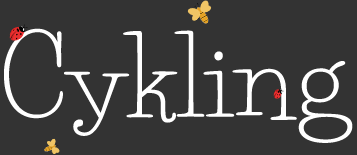
<style>
.page{position:relative;width:357px;height:155px;background:#333333}
.page>*{position:absolute;margin:0}
.t1{font:104.7px "LifeSavers-Regular";color:#ffffff;scale:1.04 1}
</style>
<div class="page">
<p class="t1" style="left:4px;top:28px;width:349px;height:115px">Cykling</p>
</div>
